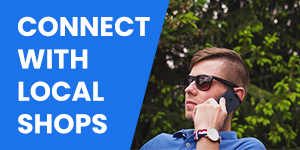
<style>
.page{position:relative;width:300px;height:150px;background:#1a73e8}
.page>*{position:absolute;margin:0}
.t1{font:27px "Poppins-Bold";color:#ffffff;text-transform:uppercase}
</style>
<div class="page">
<p class="t1" style="left:17px;top:16px;width:133px;height:118px">Connect <br>With <br>Local <br>Shops</p>
</div>
